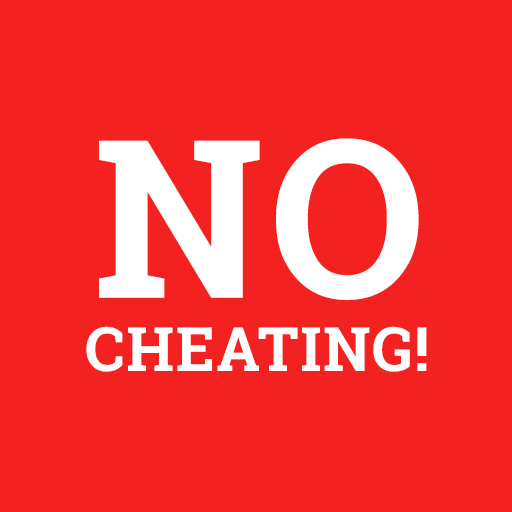
<style>
.page{position:relative;width:512px;height:512px;background:#f42121}
.page>*{position:absolute;margin:0}
.t1{font:61.3px "RobotoSlab-Bold";letter-spacing:0.025em;color:#ffffff}
.t2{font:220.5px "RobotoSlab-Bold";letter-spacing:0.025em;color:#ffffff}
</style>
<div class="page">
<p class="t1" style="left:86px;top:138px;width:341px;height:234px;text-align:center"><span class="t2">NO<br></span>CHEATING!</p>
</div>
